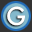
<style>
.page{position:relative;width:32px;height:32px;background:#333333}
.page>*{position:absolute;margin:0}
.t1{font:24px "Futura-Medium";color:#ffffff}
</style>
<div class="page">
<p class="t1" style="left:7px;top:6px;width:18px;height:20px">G</p>
</div>
